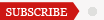
<style>
.page{position:relative;width:104px;height:20px;background:#cd1713}
.page>*{position:absolute;margin:0}
.t1{font:11px "Georgia";color:#ffffff}
</style>
<div class="page">
<p class="t1" style="left:6px;top:8px;width:62px;height:8px">SUBSCRIBE</p>
</div>
